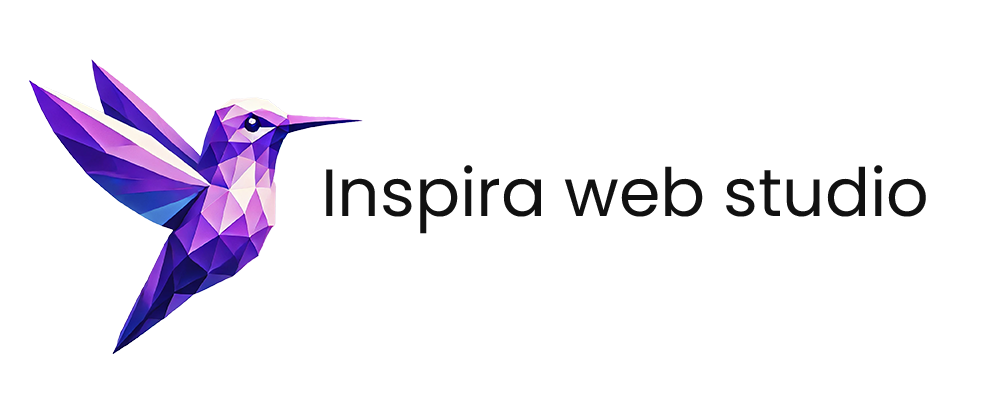
<style>
.page{position:relative;width:1000px;height:400px;background:#ffffff}
.page>*{position:absolute;margin:0}
.t1{font:66.7px "Poppins-Regular";color:#111111}
</style>
<div class="page">
<p class="t1" style="left:326px;top:165px;width:600px;height:69px">Inspira web studio</p>
</div>
